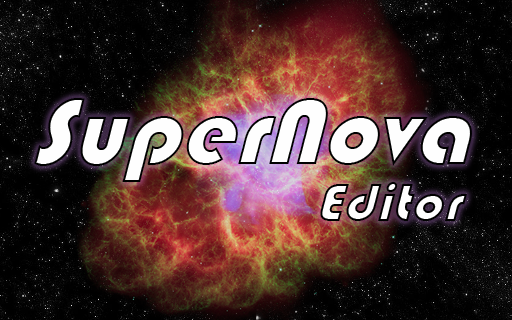
<style>
.page{position:relative;width:512px;height:320px}
.page>*{position:absolute;margin:0}
.t1{font:100px "Bauhaus93";color:#fefefe;scale:0.97 1}
.t2{font:58.3px "Bauhaus93";scale:0.97 1}
</style>
<div class="page">
<p class="t1" style="left:34px;top:98px;width:438px;height:84px">SuperNova</p>
<p class="t2" style="left:320px;top:182px;width:147px;height:40px">Editor</p>
</div>
